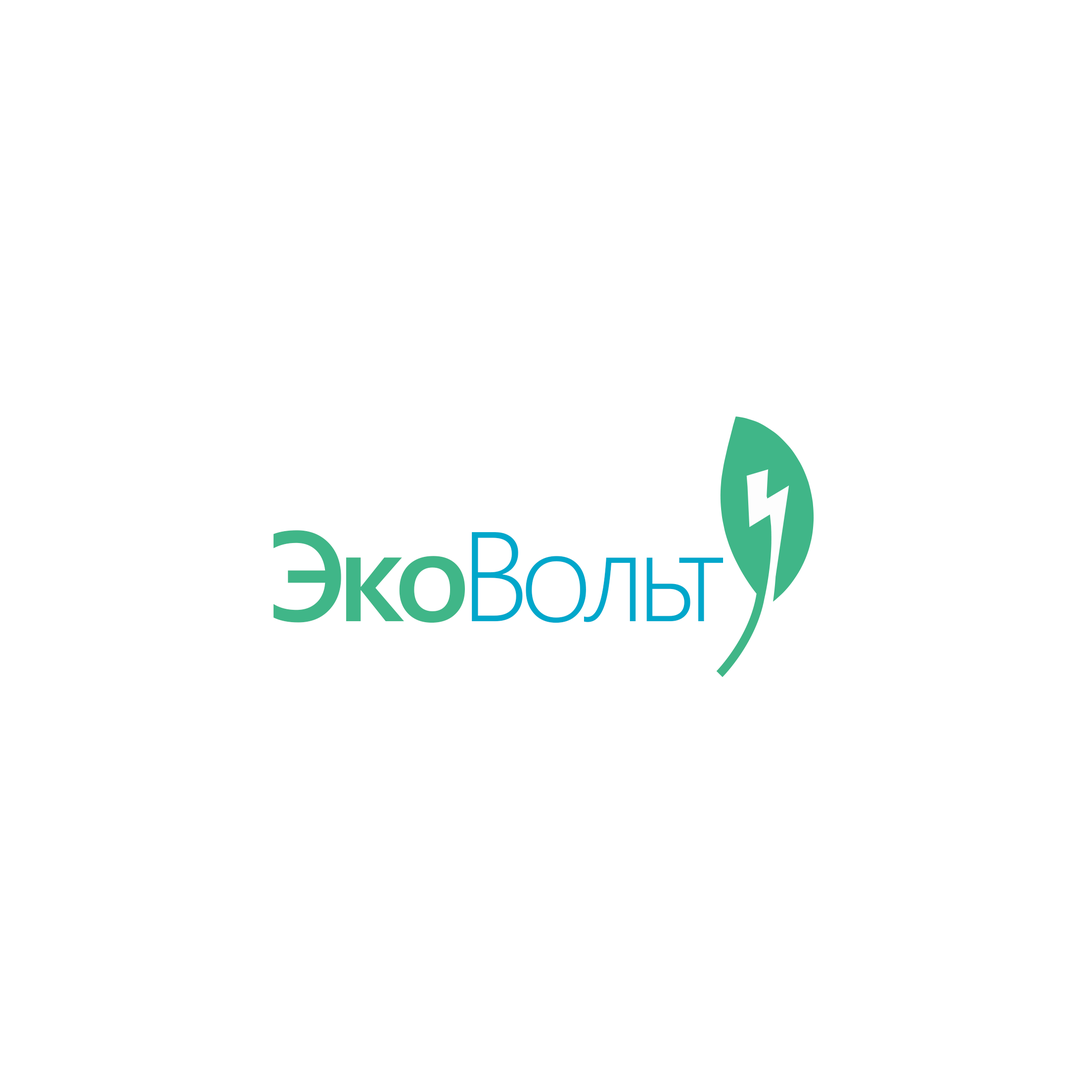
<style>
.page{position:relative;width:1092px;height:1092px;background:#ffffff}
.page>*{position:absolute;margin:0}
.t1{font:127.3px "SegoeWP-Light";letter-spacing:-0.075em;color:#00a7cb}
.t2{font:127.3px "SegoeWP-Semibold";letter-spacing:-0.075em;color:#40b688}
</style>
<div class="page">
<p class="t1" style="left:273px;top:530px;width:450px;height:93px"><span class="t2">Эко</span>Вольт</p>
</div>
